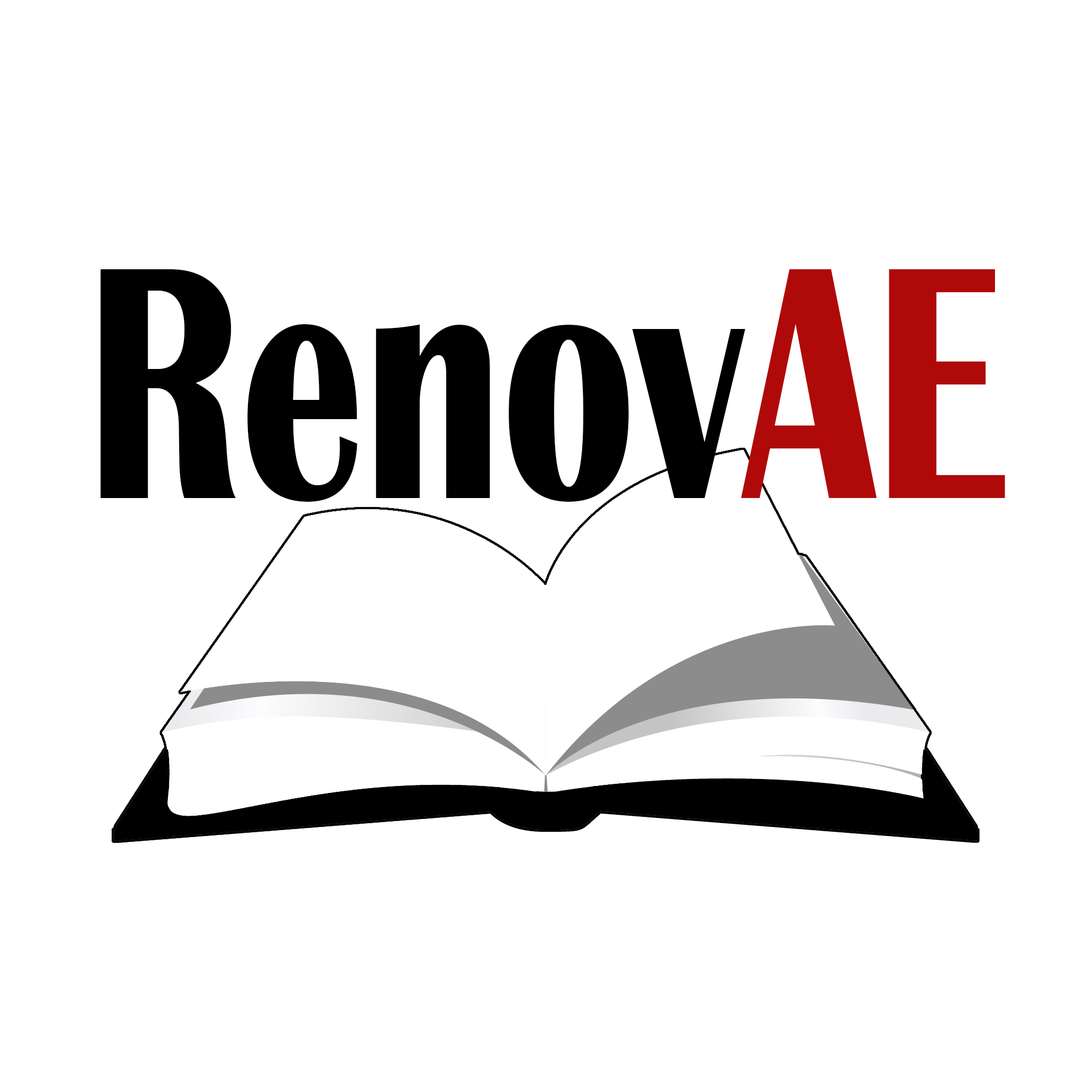
<style>
.page{position:relative;width:1092px;height:1092px;background:#ffffff}
.page>*{position:absolute;margin:0}
.t1{font:343.4px "BritannicBold";color:#000000;scale:0.71 1}
.t2{font:343.4px "BritannicBold";color:#b00909;scale:0.71 1}
</style>
<div class="page">
<p class="t1" style="left:100px;top:269px;width:905px;height:233px">Renov<span class="t2">AE</span></p>
</div>
